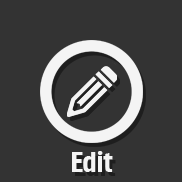
<style>
.page{position:relative;width:182px;height:182px;background:#333333}
.page>*{position:absolute;margin:0}
.t1{font:28.2px "CommunistSansBold";letter-spacing:-0.08em;color:#f4f4f4;scale:0.89 1}
</style>
<div class="page">
<p class="t1" style="left:72px;top:151px;width:41px;height:21px">Edit</p>
</div>
